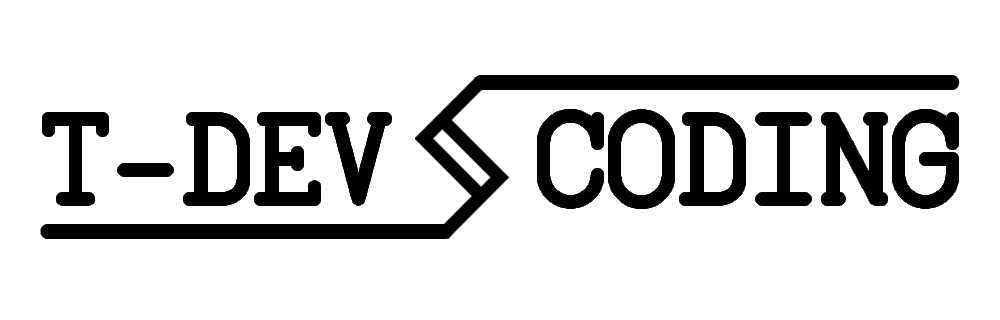
<style>
.page{position:relative;width:1000px;height:320px;background:#ffffff}
.page>*{position:absolute;margin:0}
.t1{font:141.7px "SOV_monospace";color:#000000}
</style>
<div class="page">
<p class="t1" style="left:46px;top:113px;width:909px;height:92px">T-DEV  CODING</p>
</div>
